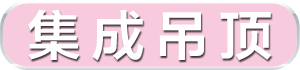
<style>
.page{position:relative;width:300px;height:70px;background:#f7cade}
.page>*{position:absolute;margin:0}
.t1{font:53.7px "FZLTZCHK--GBK1-0";letter-spacing:0.2em;color:#ffffff}
</style>
<div class="page">
<p class="t1" style="left:28px;top:9px;width:244px;height:52px">集成吊顶</p>
</div>
